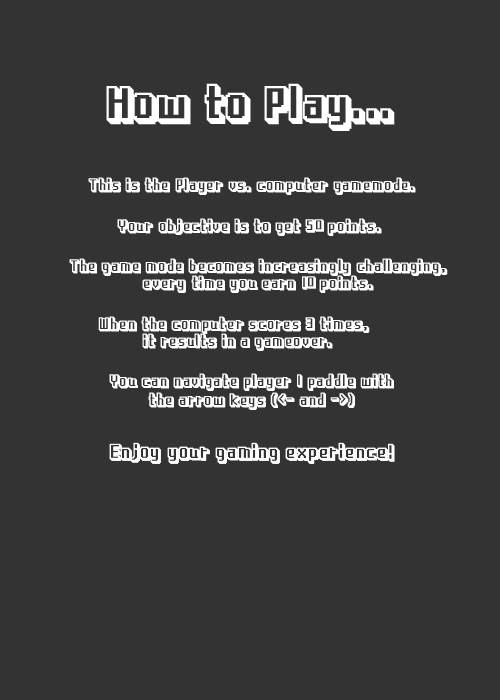
<style>
.page{position:relative;width:500px;height:700px;background:#333333}
.page>*{position:absolute;margin:0}
.t1{font:50px "RixVideoGameP3D";color:#ffffff}
.t2{font:18px "RixVideoGameP3D";color:#ffffff}
.t3{font:18px "RixVideoGameP3D";color:#fefefe}
.t4{font:22px "RixVideoGameP3D";color:#ffffff}
</style>
<div class="page">
<p class="t1" style="left:106px;top:83px;width:289px;height:48px">How to Play...</p>
<p class="t2" style="left:88px;top:177px;width:328px;height:18px">This is the Player vs. computer gamemode.</p>
<p class="t2" style="left:117px;top:218px;width:265px;height:18px">Your objective is to get 50 points.</p>
<p class="t2" style="left:69px;top:258px;width:379px;height:18px">The game mode becomes increasingly challenging,</p>
<p class="t3" style="left:142px;top:275px;width:232px;height:18px">every time you earn 10 points.</p>
<p class="t2" style="left:98px;top:316px;width:272px;height:18px">When the computer scores 3 times,</p>
<p class="t2" style="left:142px;top:333px;width:191px;height:18px">it results in a gameover.</p>
<p class="t2" style="left:109px;top:373px;width:285px;height:18px">You can navigate player 1 paddle with</p>
<p class="t2" style="left:148px;top:392px;width:207px;height:18px">the arrow keys (&lt;- and -&gt;)</p>
<p class="t4" style="left:109px;top:442px;width:286px;height:22px">Enjoy your gaming experience!</p>
</div>
